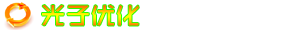
<style>
.page{position:relative;width:300px;height:30px;background:#ffffff}
.page>*{position:absolute;margin:0}
.t1{font:25px "ZHSRXT--GBK1-0"}
</style>
<div class="page">
<p class="t1" style="left:42px;top:5px;width:97px;height:21px">光子优化</p>
</div>
